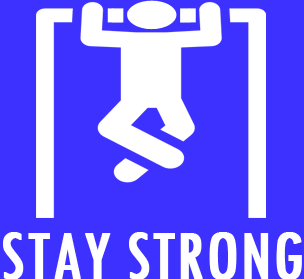
<style>
.page{position:relative;width:304px;height:279px;background:#3c31ff}
.page>*{position:absolute;margin:0}
.t1{font:72px "TwCenMT-Condensed";color:#ffffff;font-weight:bold}
</style>
<div class="page">
<p class="t1" style="left:3px;top:232px;width:299px;height:47px">STAY STRONG</p>
</div>
